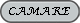
<style>
.page{position:relative;width:80px;height:23px;background:#c4c9ca}
.page>*{position:absolute;margin:0}
.t1{font:16px "LucidaCalligraphy-Italic";color:#010101;font-variant:small-caps}
</style>
<div class="page">
<p class="t1" style="left:9px;top:7px;width:61px;height:8px">camare</p>
</div>
